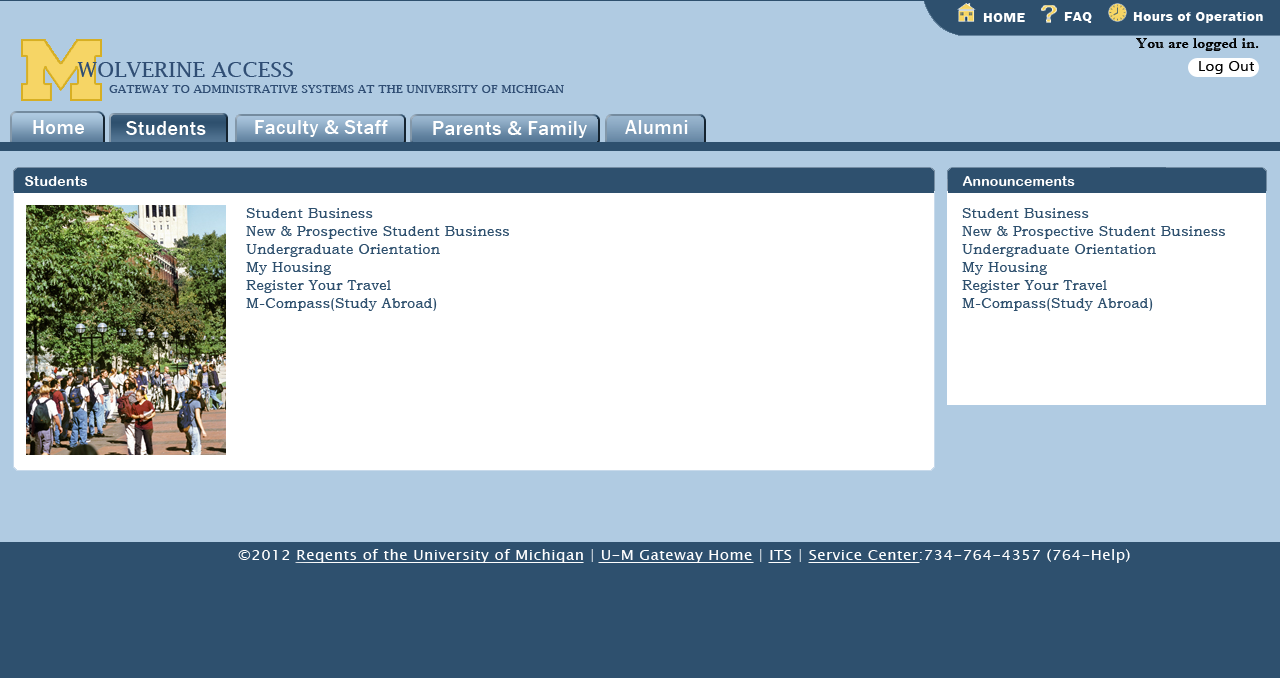
<style>
.page{position:relative;width:1280px;height:678px;background:#b0cbe2}
.page>*{position:absolute;margin:0}
.t1{font:14px "FranklinGothic-Demi";letter-spacing:0.025em;color:#ffffff;scale:1.08 1}
.t2{font:14px "ImprintMT-Shadow";letter-spacing:0.025em;color:#000000;scale:1.08 1}
.t3{font:20px "LucidaFax";color:#304e74;scale:1.08 1}
.t4{font:14px "LaoUI";letter-spacing:0.025em;color:#000000;scale:1.08 1}
.t5{font:11px "LucidaFax";color:#304e74;scale:1.08 1}
.t6{font:20px "FranklinGothic-Medium";letter-spacing:0.025em;color:#ffffff}
.t7{font:14px "ArialRoundedMTBold";letter-spacing:0.025em;color:#ffffff}
.t8{font:14px "ArialRoundedMTBold";letter-spacing:0.01em;color:#ffffff}
.t9{font:14px/18px "BookmanOldStyle";letter-spacing:0.025em;color:#2e506e}
.t10{font:14px/68px "BookmanOldStyle";letter-spacing:0.025em;color:#2e506e}
.t11{font:14px "LucidaSansUnicode";letter-spacing:0.025em;color:#ffffff;scale:1.08 1}
</style>
<div class="page">
<p class="t1" style="left:983px;top:13px;width:42px;height:9px">HOME</p>
<p class="t1" style="left:1064px;top:12px;width:28px;height:11px">FAQ</p>
<p class="t1" style="left:1133px;top:12px;width:130px;height:11px">Hours of Operation</p>
<p class="t2" style="left:1136px;top:38px;width:123px;height:13px">You are logged in.</p>
<p class="t3" style="left:77px;top:62px;width:216px;height:15px">WOLVERINE ACCESS</p>
<p class="t4" style="left:1199px;top:61px;width:55px;height:13px">Log Out</p>
<p class="t5" style="left:109px;top:85px;width:455px;height:8px">GATEWAY TO ADMINISTRATIVE SYSTEMS AT THE UNIVERSITY OF MICHIGAN</p>
<p class="t6" style="left:33px;top:120px;width:51px;height:14px">Home</p>
<p class="t6" style="left:126px;top:121px;width:80px;height:14px">Students</p>
<p class="t6" style="left:255px;top:120px;width:133px;height:17px">Faculty &amp; Staff</p>
<p class="t6" style="left:433px;top:121px;width:154px;height:17px">Parents &amp; Family</p>
<p class="t6" style="left:625px;top:120px;width:63px;height:14px">Alumni</p>
<p class="t7" style="left:25px;top:176px;width:62px;height:10px">Students</p>
<p class="t8" style="left:962px;top:176px;width:113px;height:10px">Announcements</p>
<p class="t9" style="left:246px;top:208px;width:263px;height:103px">Student Business<br>New &amp; Prospective Student Business<br>Undergraduate Orientation<br>My Housing<br>Register Your Travel<br><span class="t10">M-Compass(Study Abroad)</span></p>
<p class="t9" style="left:962px;top:208px;width:263px;height:103px">Student Business<br>New &amp; Prospective Student Business<br>Undergraduate Orientation<br>My Housing<br>Register Your Travel<br><span class="t10">M-Compass(Study Abroad)</span></p>
<p class="t11" style="left:238px;top:549px;width:892px;height:14px">©2012 Reqents of the University of Michiqan | U-M Gateway Home | ITS | Service Center:734-764-4357 (764-Help)</p>
</div>
